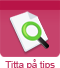
<style>
.page{position:relative;width:60px;height:68px;background:#c6436c}
.page>*{position:absolute;margin:0}
.t1{font:9.6px "ArialMT";color:#c43b66}
</style>
<div class="page">
<p class="t1" style="left:5px;top:59px;width:50px;height:9px">Titta på tips</p>
</div>
